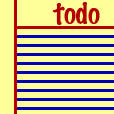
<style>
.page{position:relative;width:114px;height:114px;background:#ffff99}
.page>*{position:absolute;margin:0}
.t1{font:29px "MarkerFelt-Thin";color:#b40000}
</style>
<div class="page">
<p class="t1" style="left:52px;top:2px;width:48px;height:23px">todo</p>
</div>
